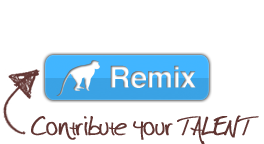
<style>
.page{position:relative;width:264px;height:144px;background:#ffffff}
.page>*{position:absolute;margin:0}
.t1{font:30px "Helvetica-Bold";letter-spacing:-0.025em}
.t2{font:21px "harrison";color:#613532;font-weight:bold}
</style>
<div class="page">
<p class="t1" style="left:110px;top:65px;width:86px;height:23px">Remix</p>
<p class="t2" style="left:31px;top:115px;width:228px;height:30px">Contribute your TALENT</p>
</div>
